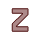
<style>
.page{position:relative;width:40px;height:40px;background:#ffffff}
.page>*{position:absolute;margin:0}
.t1{font:22.5px "GreenHillSans";letter-spacing:-0.04em;color:#ad8989}
</style>
<div class="page">
<p class="t1" style="left:12px;top:8px;width:16px;height:24px">Z</p>
</div>
